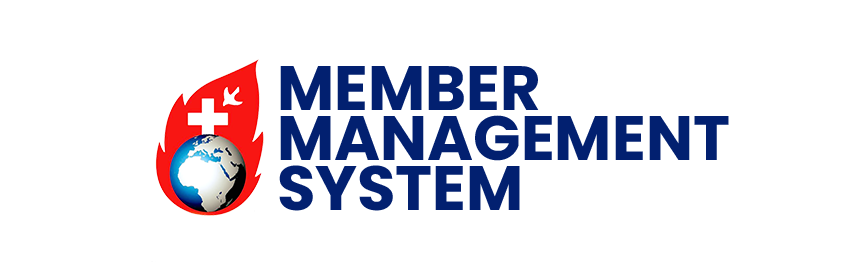
<style>
.page{position:relative;width:851px;height:277px;background:#ffffff}
.page>*{position:absolute;margin:0}
.t1{font:62.5px/50px "Poppins-Bold";color:#022070;text-transform:uppercase}
</style>
<div class="page">
<p class="t1" style="left:279px;top:66px;width:450px;height:145px">member<br>MANAGEment <br>system</p>
</div>
